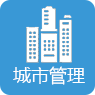
<style>
.page{position:relative;width:95px;height:95px;background:#3998d6}
.page>*{position:absolute;margin:0}
.t1{font:18px "MicrosoftYaHei";color:#ffffff}
</style>
<div class="page">
<p class="t1" style="left:13px;top:66px;width:72px;height:19px">城市管理</p>
</div>
